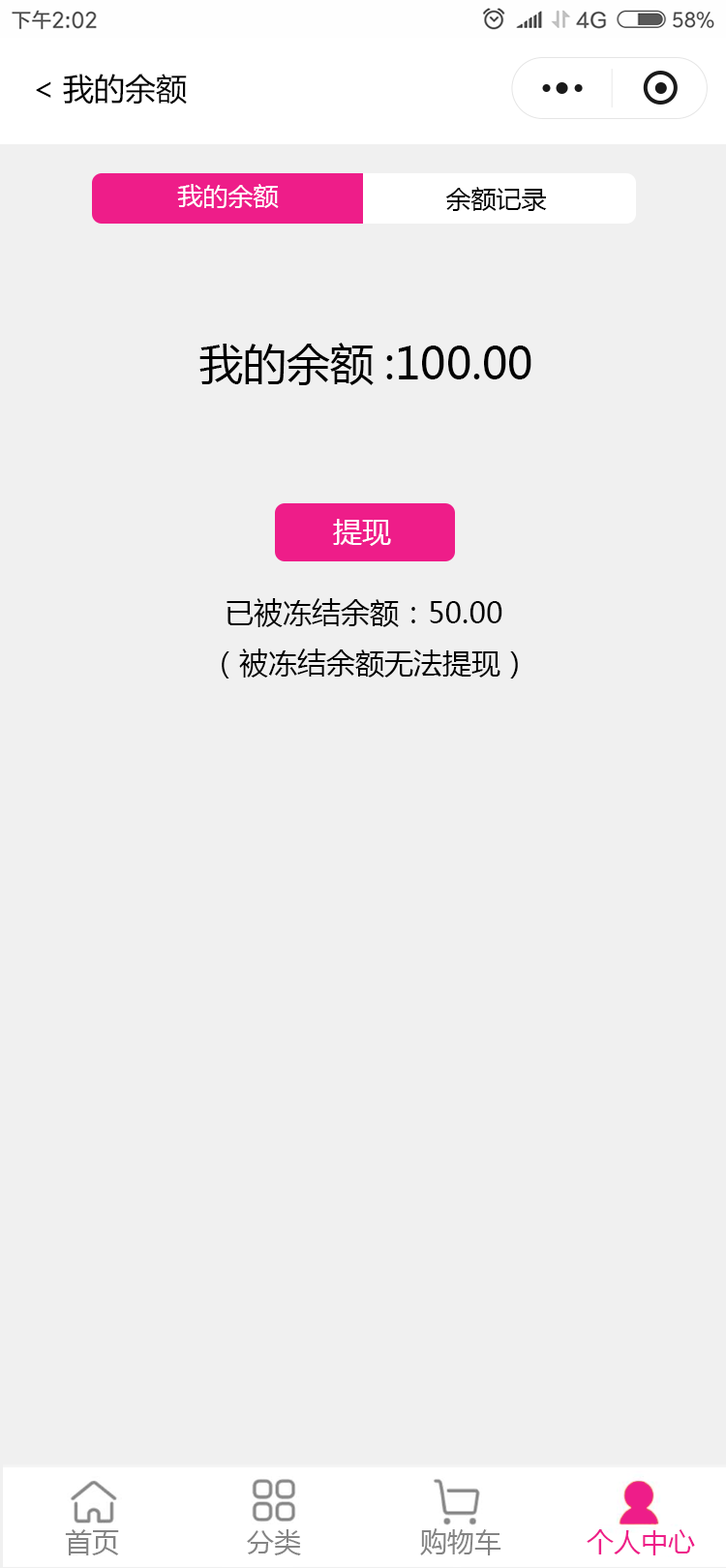
<style>
.page{position:relative;width:726px;height:1568px;background:#f0f0f0}
.page>*{position:absolute;margin:0}
.t1{font:31px "MicrosoftYaHei";color:#000000}
.t2{font:25.2px "MicrosoftYaHei";color:#ffffff}
.t3{font:25.2px "MicrosoftYaHei";color:#000000}
.t4{font:43.6px "MicrosoftYaHei";color:#000000}
.t5{font:29px "MicrosoftYaHei";color:#ffffff}
.t6{font:29px "MicrosoftYaHei";color:#000000}
</style>
<div class="page">
<p class="t1" style="left:36px;top:74px;width:151px;height:31px">&lt;我的余额</p>
<p class="t2" style="left:177px;top:184px;width:102px;height:24px">我的余额</p>
<p class="t3" style="left:445px;top:187px;width:102px;height:24px">余额记录</p>
<p class="t4" style="left:199px;top:343px;width:332px;height:42px">我的余额:100.00</p>
<p class="t5" style="left:333px;top:519px;width:58px;height:27px">提现</p>
<p class="t6" style="left:226px;top:598px;width:276px;height:29px">已被冻结余额：50.00</p>
<p class="t6" style="left:222px;top:648px;width:296px;height:30px">（被冻结余额无法提现）</p>
</div>
